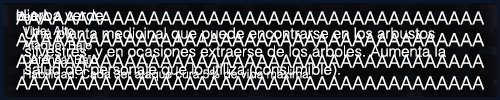
<style>
.page{position:relative;width:500px;height:100px;background:#08080a}
.page>*{position:absolute;margin:0}
.t1{font:12px "HelvLight-Normal";color:#ffffff}
.t2{font:18px "HelvLight-Normal";color:#ffffff}
.t3{font:15px "HelvLight-Normal";color:#ffffff}
</style>
<div class="page">
<p class="t1" style="left:16px;top:11px;width:295px;height:70px">Betty<br>  Vida: Alto<br>  Ataque: Bajo<br>  Defensa: Bajo<br>  Habilidad: Cada 3er ataque cura 5% de vida máxima.</p>
<p class="t2" style="left:16px;top:11px;width:468px;height:79px">AAAAAAAAAAAAAAAAAAAAAAAAAAAAAAAAAAAAAAA<br>AAAAAAAAAAAAAAAAAAAAAAAAAAAAAAAAAAAAAAA<br>AAAAAAAAAAAAAAAAAAAAAAAAAAAAAAAAAAAAAAA<br>AAAAAAAAAAAAAAAAAAAAAAAAAAAAAAAAAAAAAAA</p>
<p class="t3" style="left:17px;top:9px;width:429px;height:69px">Hierba verde:<br>  Una planta medicinal que puede encontrarse en los arbustos<br>  silvestres, y en ocasiones extraerse de los árboles. Aumenta la<br>  salud del personaje que lo utiliza (consumible).</p>
</div>
